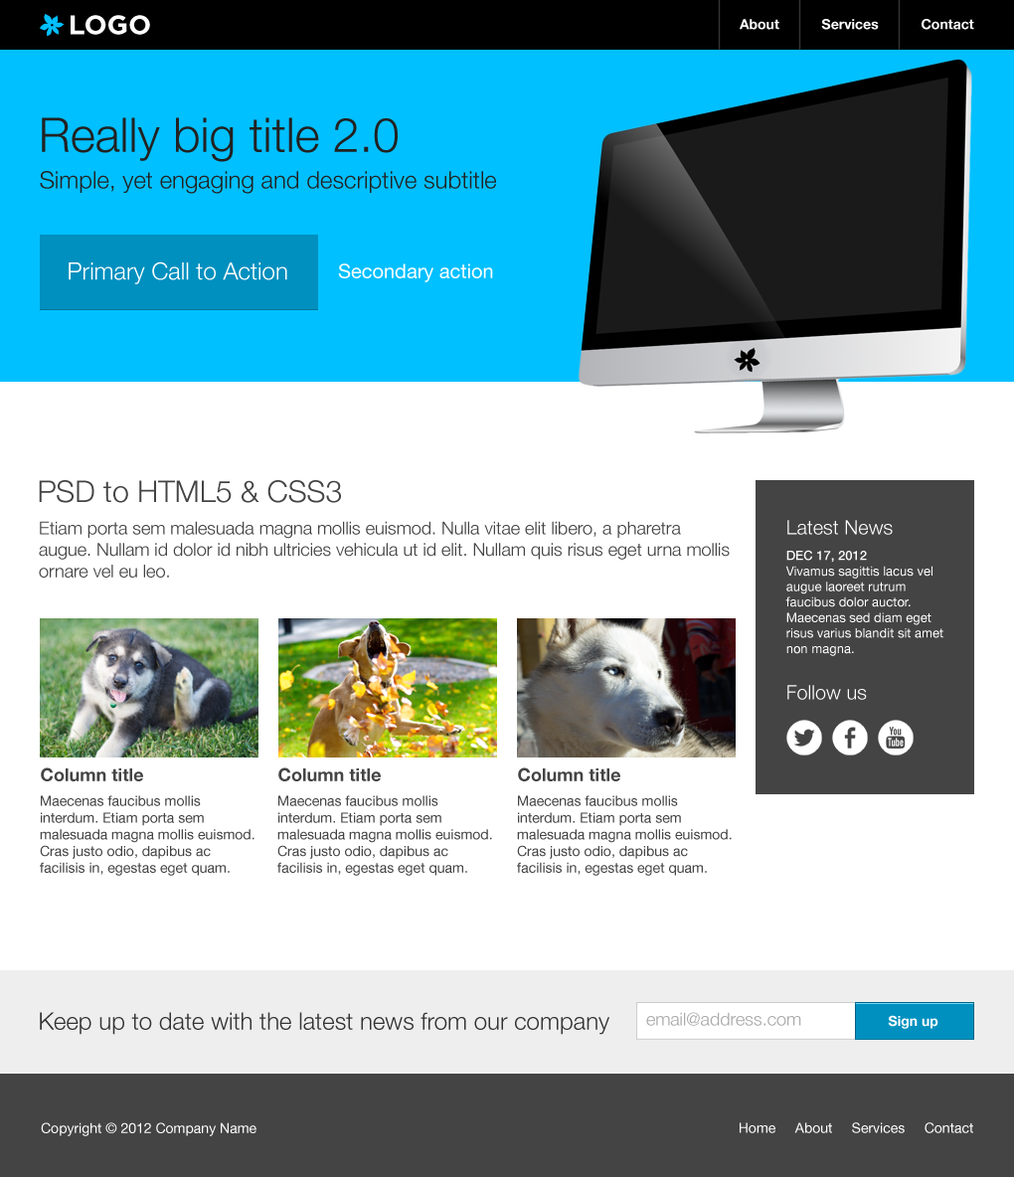
<style>
.page{position:relative;width:1014px;height:1177px;background:#ffffff}
.page>*{position:absolute;margin:0}
.t1{font:27px "Gotham-Bold";color:#ffffff}
.t2{font:13.9px "HelveticaNeue-Bold";color:#ffffff}
.t3{font:47.7px "HelveticaNeue-Light";color:#222222}
.t4{font:23.8px "HelveticaNeue-Light";color:#222222}
.t5{font:23.8px "HelveticaNeue-Light";color:#ffffff}
.t6{font:19.9px "HelveticaNeue";color:#ffffff}
.t7{font:29.8px "HelveticaNeue-Light";color:#444444}
.t8{font:17.9px "HelveticaNeue-Light";color:#444444}
.t9{font:19.9px "HelveticaNeue-Light";color:#ffffff}
.t10{font:12.9px "HelveticaNeue";color:#ffffff}
.t11{font:12.9px "HelveticaNeue-Medium";color:#ffffff}
.t12{font:17.9px "HelveticaNeue-Bold";color:#444444}
.t13{font:13.9px "HelveticaNeue";color:#444444}
.t14{font:23.8px "HelveticaNeue-Light";color:#333333}
.t15{font:17.9px "HelveticaNeue-Light";color:#aaaaaa}
.t16{font:13.9px "HelveticaNeue-Bold";color:#fefefe}
.t17{font:13.9px "HelveticaNeue";color:#ffffff}
</style>
<div class="page">
<p class="t1" style="left:71px;top:15px;width:79px;height:20px">LOGO</p>
<p class="t2" style="left:739px;top:19px;width:235px;height:11px">About           Services           Contact</p>
<p class="t3" style="left:42px;top:117px;width:355px;height:45px">Really big title 2.0</p>
<p class="t4" style="left:40px;top:171px;width:456px;height:23px">Simple, yet engaging and descriptive subtitle</p>
<p class="t5" style="left:69px;top:261px;width:218px;height:23px">Primary Call to Action</p>
<p class="t6" style="left:338px;top:263px;width:155px;height:19px">Secondary action</p>
<p class="t7" style="left:39px;top:480px;width:302px;height:23px">PSD to HTML5 &amp; CSS3</p>
<p class="t8" style="left:39px;top:521px;width:690px;height:56px">Etiam porta sem malesuada magna mollis euismod. Nulla vitae elit libero, a pharetra augue. Nullam id dolor id nibh ultricies vehicula ut id elit. Nullam quis risus eget urna mollis ornare vel eu leo.</p>
<p class="t9" style="left:787px;top:520px;width:105px;height:15px">Latest News</p>
<p class="t10" style="left:785px;top:549px;width:158px;height:107px"><span class="t11">DEC 17, 2012<br></span>Vivamus sagittis lacus vel augue laoreet rutrum faucibus dolor auctor. Maecenas sed diam eget risus varius blandit sit amet non magna.</p>
<p class="t9" style="left:787px;top:685px;width:79px;height:15px">Follow us</p>
<p class="t12" style="left:41px;top:767px;width:102px;height:14px">Column title</p>
<p class="t12" style="left:278px;top:767px;width:103px;height:14px">Column title</p>
<p class="t12" style="left:518px;top:767px;width:102px;height:14px">Column title</p>
<p class="t13" style="left:40px;top:795px;width:214px;height:80px">Maecenas faucibus mollis interdum. Etiam porta sem malesuada magna mollis euismod. Cras justo odio, dapibus ac facilisis in, egestas eget quam.</p>
<p class="t13" style="left:277px;top:795px;width:215px;height:80px">Maecenas faucibus mollis interdum. Etiam porta sem malesuada magna mollis euismod. Cras justo odio, dapibus ac facilisis in, egestas eget quam.</p>
<p class="t13" style="left:517px;top:795px;width:214px;height:80px">Maecenas faucibus mollis interdum. Etiam porta sem malesuada magna mollis euismod. Cras justo odio, dapibus ac facilisis in, egestas eget quam.</p>
<p class="t14" style="left:40px;top:1012px;width:569px;height:22px">Keep up to date with the latest news from our company</p>
<p class="t15" style="left:646px;top:1012px;width:155px;height:13px">email@address.com</p>
<p class="t16" style="left:887px;top:1015px;width:51px;height:13px">Sign up</p>
<p class="t17" style="left:41px;top:1122px;width:215px;height:14px">Copyright © 2012 Company Name</p>
<p class="t17" style="left:739px;top:1122px;width:234px;height:11px">Home     About     Services     Contact</p>
</div>
